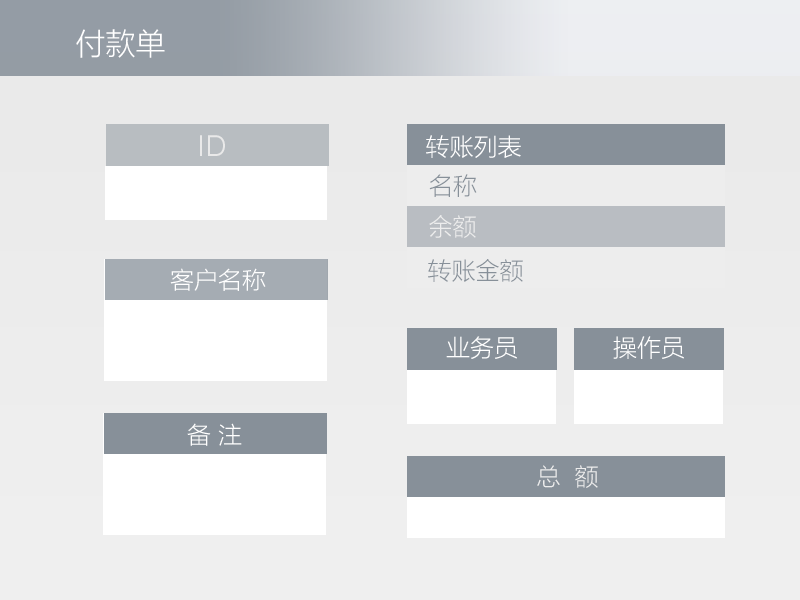
<style>
.page{position:relative;width:800px;height:600px}
.page>*{position:absolute;margin:0}
.t1{font:30px "MicrosoftYaHeiLight";color:#ffffff}
.t2{font:30px "SofiaProLight";color:#e9e9e9}
.t3{font:24px "MicrosoftYaHeiLight";color:#ffffff}
.t4{font:24px "MicrosoftYaHeiLight";color:#879099}
.t5{font:24px "MicrosoftYaHeiLight";color:#ededed}
.t6{font:23.4px "MicrosoftYaHeiLight";color:#ffffff}
</style>
<div class="page">
<p class="t1" style="left:76px;top:29px;width:89px;height:29px">付款单</p>
<p class="t2" style="left:200px;top:135px;width:25px;height:21px">ID</p>
<p class="t3" style="left:426px;top:135px;width:95px;height:23px">转账列表</p>
<p class="t4" style="left:429px;top:174px;width:48px;height:23px">名称</p>
<p class="t5" style="left:429px;top:215px;width:47px;height:23px">余额</p>
<p class="t6" style="left:170px;top:268px;width:96px;height:23px">客户名称</p>
<p class="t4" style="left:428px;top:259px;width:95px;height:23px">转账金额</p>
<p class="t3" style="left:446px;top:336px;width:71px;height:23px">业务员</p>
<p class="t3" style="left:613px;top:336px;width:71px;height:23px">操作员</p>
<p class="t6" style="left:187px;top:423px;width:55px;height:23px">备 注</p>
<p class="t5" style="left:537px;top:465px;width:61px;height:23px">总  额</p>
</div>
